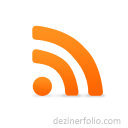
<style>
.page{position:relative;width:128px;height:128px;background:#ffffff}
.page>*{position:absolute;margin:0}
.t1{font:10px "Calibri"}
</style>
<div class="page">
<p class="t1" style="left:53px;top:117px;width:68px;height:7px">dezinerfolio.com</p>
</div>
